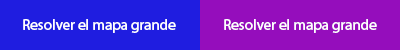
<style>
.page{position:relative;width:400px;height:50px;background:#950dbc}
.page>*{position:absolute;margin:0}
.t1{font:15px "MyriadHebrew-Regular";color:#ffffff}
</style>
<div class="page">
<p class="t1" style="left:23px;top:19px;width:153px;height:14px">Resolver el mapa grande</p>
<p class="t1" style="left:224px;top:19px;width:153px;height:14px">Resolver el mapa grande</p>
</div>
